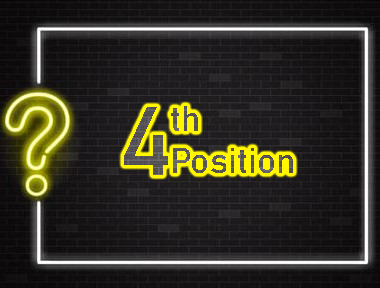
<style>
.page{position:relative;width:380px;height:288px}
.page>*{position:absolute;margin:0}
.t1{font:96px "Bahnschrift";color:#585458}
.t2{font:35.3px "Bahnschrift";color:#5a5658}
</style>
<div class="page">
<p class="t1" style="left:124px;top:107px;width:44px;height:68px">4</p>
<p class="t2" style="left:171px;top:106px;width:122px;height:67px">th<br>Position</p>
</div>
